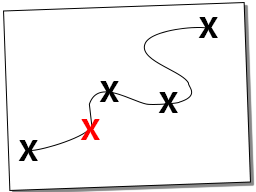
<style>
.page{position:relative;width:256px;height:192px;background:#ffffff}
.page>*{position:absolute;margin:0}
.t1{font:30px "MicrosoftPhagsPa-Bold";color:#000000}
.t2{font:30px "MicrosoftPhagsPa-Bold";color:#ff0000}
</style>
<div class="page">
<p class="t1" style="left:198px;top:17px;width:20px;height:21px">X</p>
<p class="t1" style="left:99px;top:81px;width:20px;height:21px">X</p>
<p class="t1" style="left:158px;top:92px;width:20px;height:21px">X</p>
<p class="t2" style="left:80px;top:119px;width:20px;height:21px">X</p>
<p class="t1" style="left:18px;top:140px;width:20px;height:21px">X</p>
</div>
